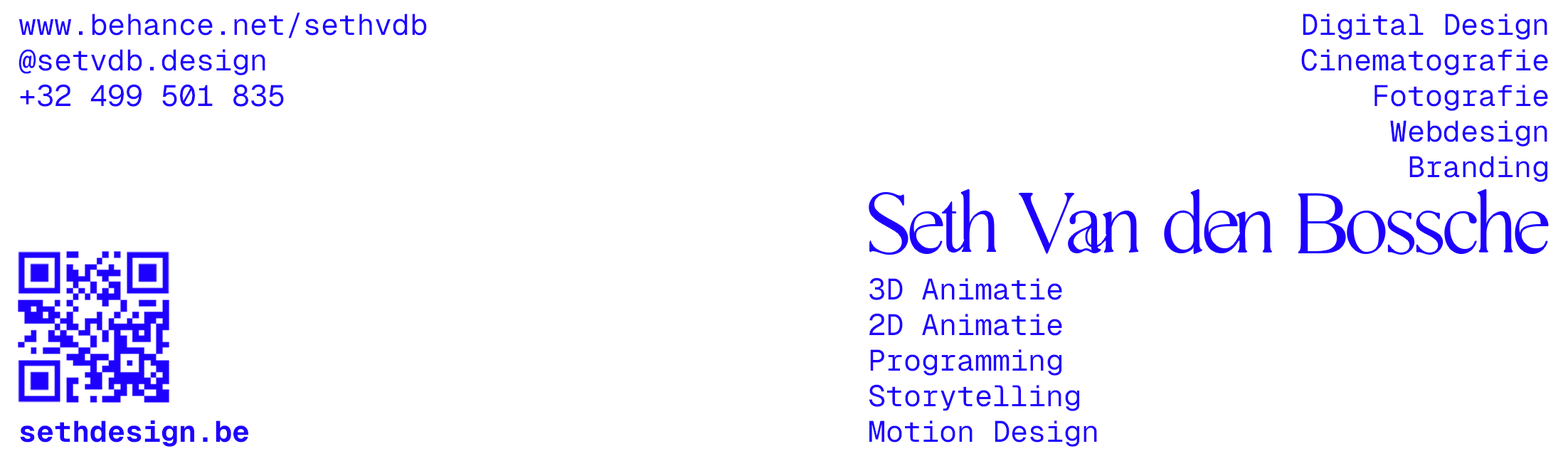
<style>
.page{position:relative;width:1568px;height:461px;background:#ffffff}
.page>*{position:absolute;margin:0}
.t1{font:29.6px "GeistMono-Regular";color:#1e00ff}
.t2{font:74.1px "Gallient-Regular";color:#1e00ff}
.t3{font:29.6px "GeistMono-Bold";color:#1e00ff}
</style>
<div class="page">
<p class="t1" style="left:18px;top:12px;width:409px;height:95px">www.behance.net/sethvdb <br>@setvdb.design <br>+32 499 501 835</p>
<p class="t1" style="left:1301px;top:14px;width:247px;height:168px;text-align:right">Digital Design<br>Cinematografie<br>Fotografie<br>Webdesign<br>Branding</p>
<p class="t2" style="left:869px;top:189px;width:679px;height:65px">Seth Van den Bossche</p>
<p class="t1" style="left:869px;top:277px;width:228px;height:170px">3D Animatie<br>2D Animatie<br>Programming<br>Storytelling<br>Motion Design</p>
<p class="t3" style="left:20px;top:420px;width:228px;height:27px">sethdesign.be</p>
</div>
